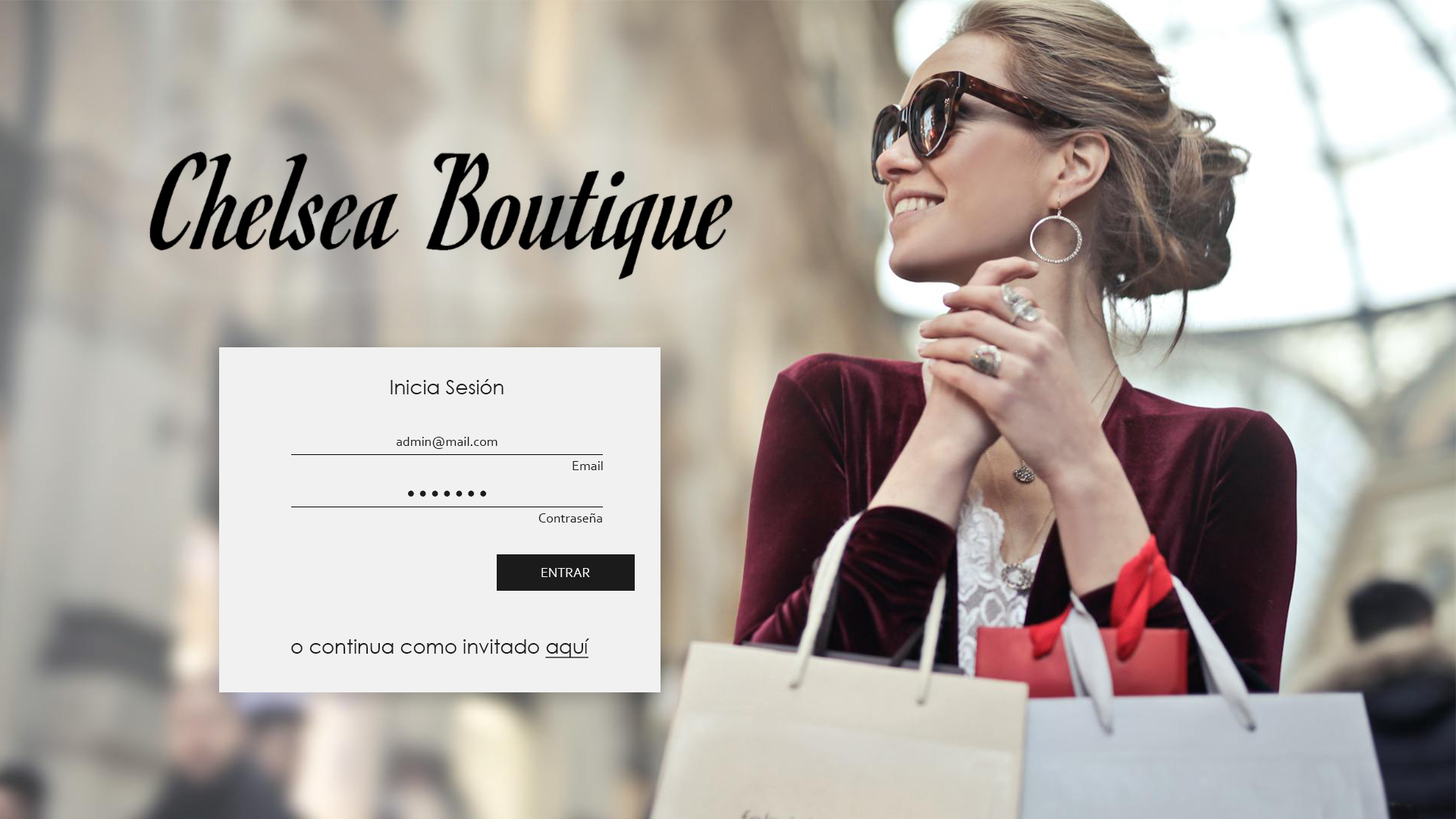
<style>
.page{position:relative;width:1456px;height:819px}
.page>*{position:absolute;margin:0}
.t1{font:19.7px "CenturyGothic";color:#1b1b1b}
.t2{font:13.6px "Corbel";color:#1b1b1b}
.t3{font:13.6px "ArialMT";color:#1b1b1b}
.t4{font:13.6px "Corbel";color:#f4f4f4}
.t5{font:19.7px "CenturyGothic";color:#1b1b1b;text-decoration:underline}
</style>
<div class="page">
<p class="t1" style="left:391px;top:379px;width:113px;height:15px">Inicia Sesión</p>
<p class="t2" style="left:397px;top:437px;width:100px;height:12px">admin@mail.com</p>
<p class="t2" style="left:573px;top:461px;width:30px;height:9px">Email</p>
<p class="t3" style="left:408px;top:491px;width:79px;height:6px">● ● ● ● ● ● ●</p>
<p class="t2" style="left:538px;top:513px;width:64px;height:9px">Contraseña</p>
<p class="t4" style="left:541px;top:568px;width:49px;height:9px">ENTRAR</p>
<p class="t1" style="left:291px;top:639px;width:298px;height:19px">o continua como invitado <span class="t5">aquí</span></p>
</div>
